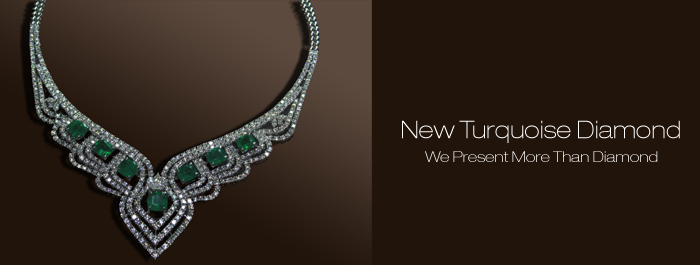
<style>
.page{position:relative;width:700px;height:265px;background:#21140b}
.page>*{position:absolute;margin:0}
.t1{font:24px "HelveticaNeueLT-ThinExt";color:#ffffff}
.t2{font:15px "HelveticaNeueLT-ThinExt"}
</style>
<div class="page">
<p class="t1" style="left:402px;top:120px;width:278px;height:23px">New Turquoise Diamond</p>
<p class="t2" style="left:425px;top:151px;width:233px;height:11px">We Present More Than Diamond</p>
</div>
